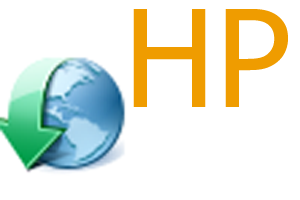
<style>
.page{position:relative;width:300px;height:200px;background:#ffffff}
.page>*{position:absolute;margin:0}
.t1{font:135.5px "Tahoma";color:#ef9c00}
</style>
<div class="page">
<p class="t1" style="left:133px;top:9px;width:155px;height:98px">HP</p>
</div>
